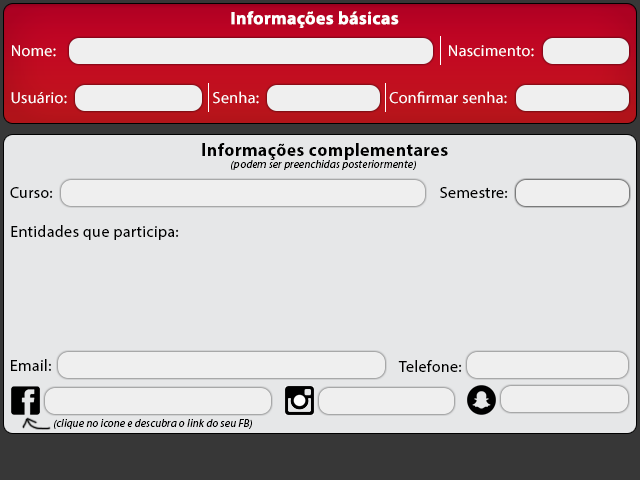
<style>
.page{position:relative;width:640px;height:480px;background:#e6e7e8}
.page>*{position:absolute;margin:0}
.t1{font:18px "MyriadPro-Bold";letter-spacing:0.02em;color:#ffffff}
.t2{font:16px "MyriadPro-Regular";letter-spacing:0.02em;color:#ffffff}
.t3{font:18px "MyriadPro-Bold";letter-spacing:0.02em;color:#000000}
.t4{font:11px "MyriadPro-It";letter-spacing:0.02em;color:#000000}
.t5{font:16px "MyriadPro-Regular";letter-spacing:0.02em;color:#000000}
</style>
<div class="page">
<p class="t1" style="left:231px;top:11px;width:168px;height:17px">Informações básicas</p>
<p class="t2" style="left:12px;top:45px;width:44px;height:12px">Nome:</p>
<p class="t2" style="left:449px;top:45px;width:85px;height:12px">Nascimento:</p>
<p class="t2" style="left:11px;top:92px;width:56px;height:12px">Usuário:</p>
<p class="t2" style="left:213px;top:91px;width:46px;height:13px">Senha:</p>
<p class="t2" style="left:389px;top:91px;width:118px;height:13px">Confirmar senha:</p>
<p class="t3" style="left:202px;top:143px;width:246px;height:17px">Informações complementares</p>
<p class="t4" style="left:231px;top:160px;width:185px;height:10px">(podem ser preenchidas posteriormente)</p>
<p class="t5" style="left:10px;top:187px;width:43px;height:11px">Curso:</p>
<p class="t5" style="left:440px;top:187px;width:68px;height:11px">Semestre:</p>
<p class="t5" style="left:11px;top:225px;width:168px;height:15px">Entidades que participa:</p>
<p class="t5" style="left:11px;top:359px;width:40px;height:12px">Email:</p>
<p class="t5" style="left:398px;top:360px;width:64px;height:12px">Telefone:</p>
<p class="t4" style="left:54px;top:419px;width:198px;height:10px">(clique no icone e descubra o link do seu FB)</p>
</div>
